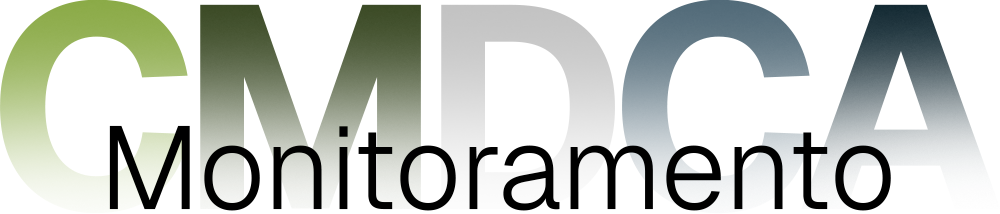
<style>
.page{position:relative;width:1000px;height:214px;background:#ffffff}
.page>*{position:absolute;margin:0}
.t1{font:287.5px "Geist-Bold";letter-spacing:-0.06em}
.t2{font:117px "Geist-Light";color:#000000}
</style>
<div class="page">
<p class="t1" style="left:0px;top:0px;width:1001px;height:214px">CMDCA</p>
<p class="t2" style="left:109px;top:125px;width:782px;height:86px">Monitoramento</p>
</div>
